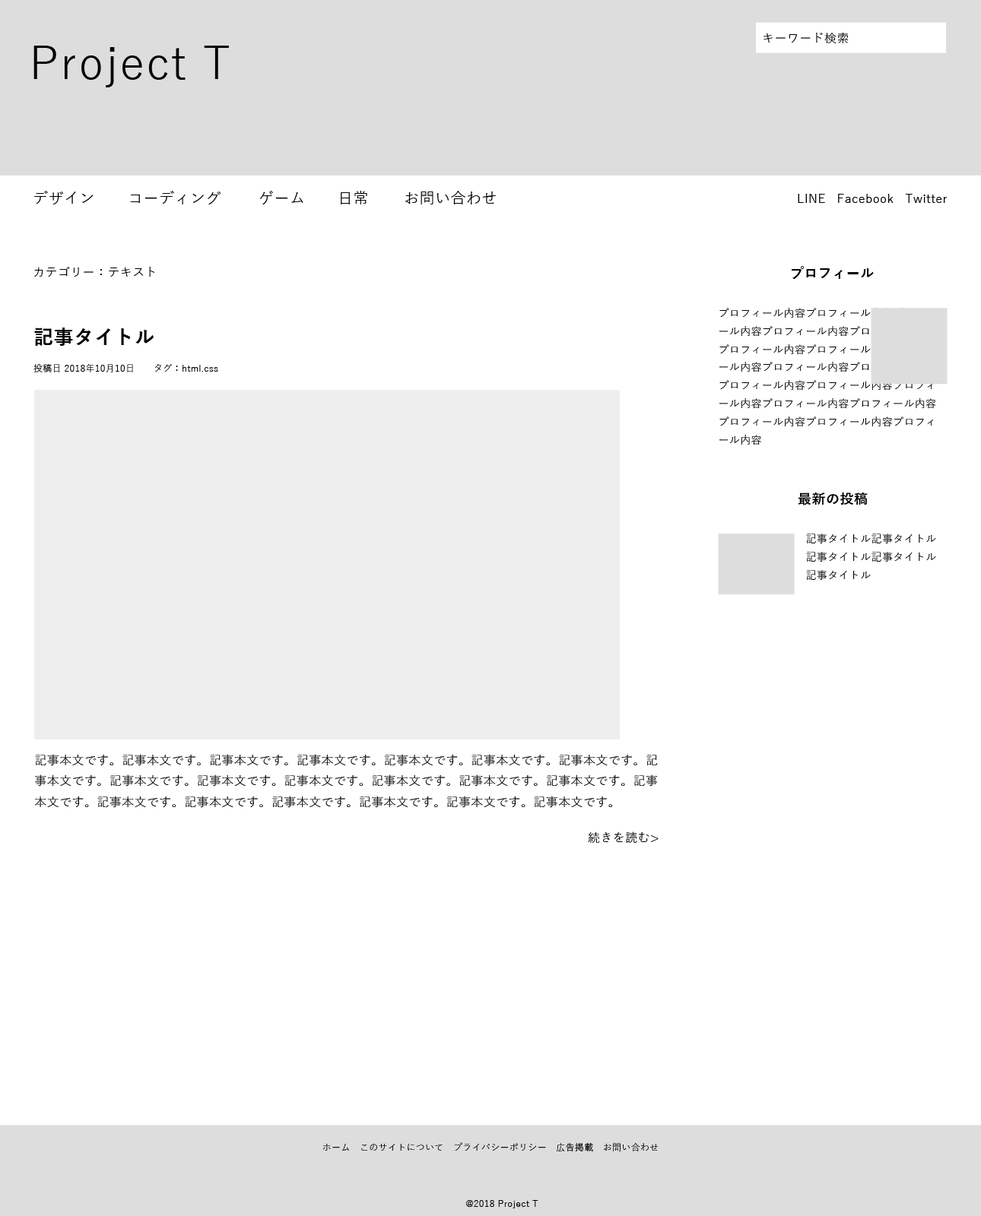
<style>
.page{position:relative;width:981px;height:1216px;background:#ffffff}
.page>*{position:absolute;margin:0}
.t1{font:12.2px "YuGothic-Regular";letter-spacing:0.025em;color:#000000}
.t2{font:45.6px "YuGothic-Regular";letter-spacing:0.025em;color:#000000}
.t3{font:15.2px "YuGothic-Regular";letter-spacing:0.025em;color:#000000}
.t4{font:13.7px "YuGothic-Bold";letter-spacing:0.025em;color:#000000}
.t5{font:10.6px/18.1px "YuGothic-Regular";letter-spacing:0.025em;color:#000000}
.t6{font:19.8px "YuGothic-Bold";letter-spacing:0.025em;color:#000000}
.t7{font:9.1px "YuGothic-Regular";letter-spacing:0.025em;color:#000000}
.t8{font:12.2px/20.7px "YuGothic-Regular";letter-spacing:0.025em;color:#000000}
.t9{font:12.2px/125.7px "YuGothic-Regular";letter-spacing:0.025em;color:#000000}
</style>
<div class="page">
<p class="t1" style="left:763px;top:32px;width:85px;height:12px">キーワード検索</p>
<p class="t2" style="left:33px;top:46px;width:196px;height:41px">Project T</p>
<p class="t3" style="left:34px;top:191px;width:59px;height:13px">デザイン</p>
<p class="t3" style="left:130px;top:191px;width:91px;height:13px">コーディング</p>
<p class="t3" style="left:259px;top:191px;width:44px;height:13px">ゲーム</p>
<p class="t3" style="left:341px;top:191px;width:26px;height:13px">日常</p>
<p class="t3" style="left:404px;top:191px;width:92px;height:13px">お問い合わせ</p>
<p class="t1" style="left:797px;top:194px;width:149px;height:9px">LINE   Facebook   Twitter</p>
<p class="t1" style="left:34px;top:267px;width:120px;height:10px">カテゴリー：テキスト</p>
<p class="t4" style="left:791px;top:266px;width:82px;height:13px">プロフィール</p>
<p class="t5" style="left:719px;top:308px;width:217px;height:137px">プロフィール内容プロフィール内容プロフィール内容プロフィール内容プロフィール内容プロフィール内容プロフィール内容プロフィール内容プロフィール内容プロフィール内容プロフィール内容プロフィール内容プロフィール内容プロフィール内容プロフィール内容プロフィール内容プロフィール内容プロフィール内容</p>
<p class="t6" style="left:34px;top:328px;width:120px;height:18px">記事タイトル</p>
<p class="t7" style="left:33px;top:364px;width:100px;height:8px">投稿日 2018年10月10日</p>
<p class="t7" style="left:154px;top:364px;width:64px;height:8px">タグ：html.css</p>
<p class="t4" style="left:797px;top:493px;width:70px;height:12px">最新の投稿</p>
<p class="t5" style="left:806px;top:534px;width:130px;height:47px">記事タイトル記事タイトル記事タイトル記事タイトル記事タイトル</p>
<p class="t8" style="left:34px;top:754px;width:623px;height:54px">記事本文です。記事本文です。記事本文です。記事本文です。記事本文です。記事本文です。記事本文です。記事本文です。記事本文です。記事本文です。記事本文です。記事本文です。記事本文です。記事本文です。記事本文です。記事本文です。記事本文です。<span class="t9">記事本文です。記事本文です。記事本文です。記事本文です。</span></p>
<p class="t1" style="left:588px;top:832px;width:70px;height:12px">続きを読む&gt;</p>
<p class="t7" style="left:322px;top:1142px;width:336px;height:10px">ホーム　このサイトについて　プライバシーポリシー　広告掲載　お問い合わせ</p>
<p class="t7" style="left:465px;top:1200px;width:73px;height:9px">@2018 Project T</p>
</div>
